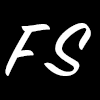
<style>
.page{position:relative;width:100px;height:100px;background:#000000}
.page>*{position:absolute;margin:0}
.t1{font:83.3px "SignPainter-HouseScript";color:#ffffff}
</style>
<div class="page">
<p class="t1" style="left:5px;top:24px;width:45px;height:52px">F</p>
<p class="t1" style="left:44px;top:23px;width:47px;height:53px">S</p>
</div>
